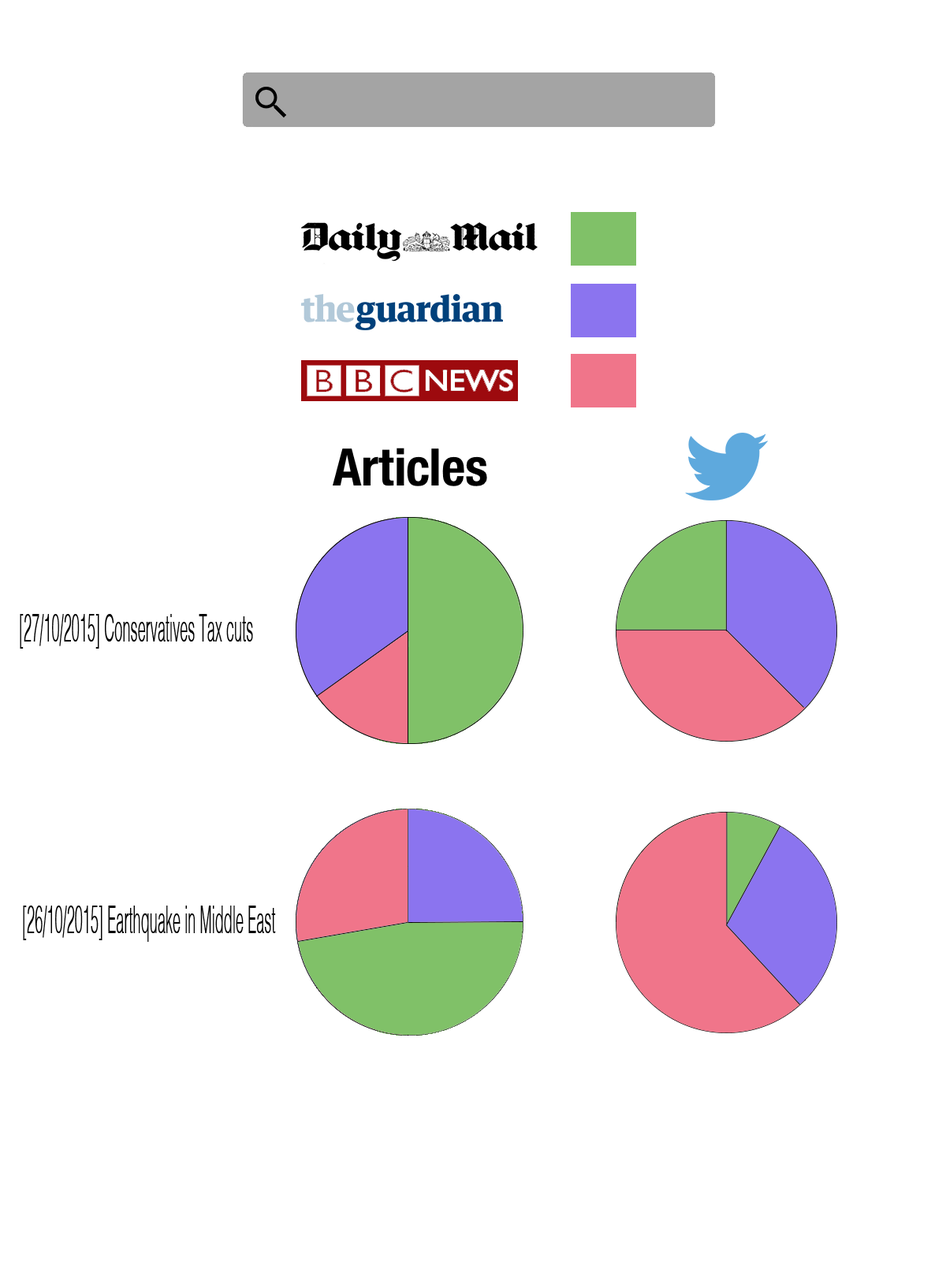
<style>
.page{position:relative;width:946px;height:1261px;background:#ffffff}
.page>*{position:absolute;margin:0}
.t1{font:51.6px "HelveticaNeue-CondensedBold";color:#000000}
.t2{font:38.5px "Helvetica-Light";color:#000000;scale:0.37 1}
</style>
<div class="page">
<p class="t1" style="left:333px;top:448px;width:154px;height:38px">Articles</p>
<p class="t2" style="left:20px;top:614px;width:233px;height:35px">[27/10/2015] Conservatives Tax cuts</p>
<p class="t2" style="left:23px;top:905px;width:253px;height:37px">[26/10/2015] Earthquake in Middle East</p>
</div>
